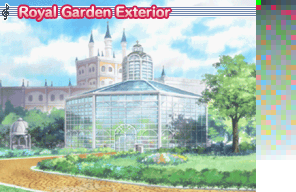
<style>
.page{position:relative;width:296px;height:192px}
.page>*{position:absolute;margin:0}
.t1{font:12px "HummingStd-E";letter-spacing:0.02em}
</style>
<div class="page">
<p class="t1" style="left:19px;top:6px;width:152px;height:14px">Royal Garden Exterior</p>
</div>
